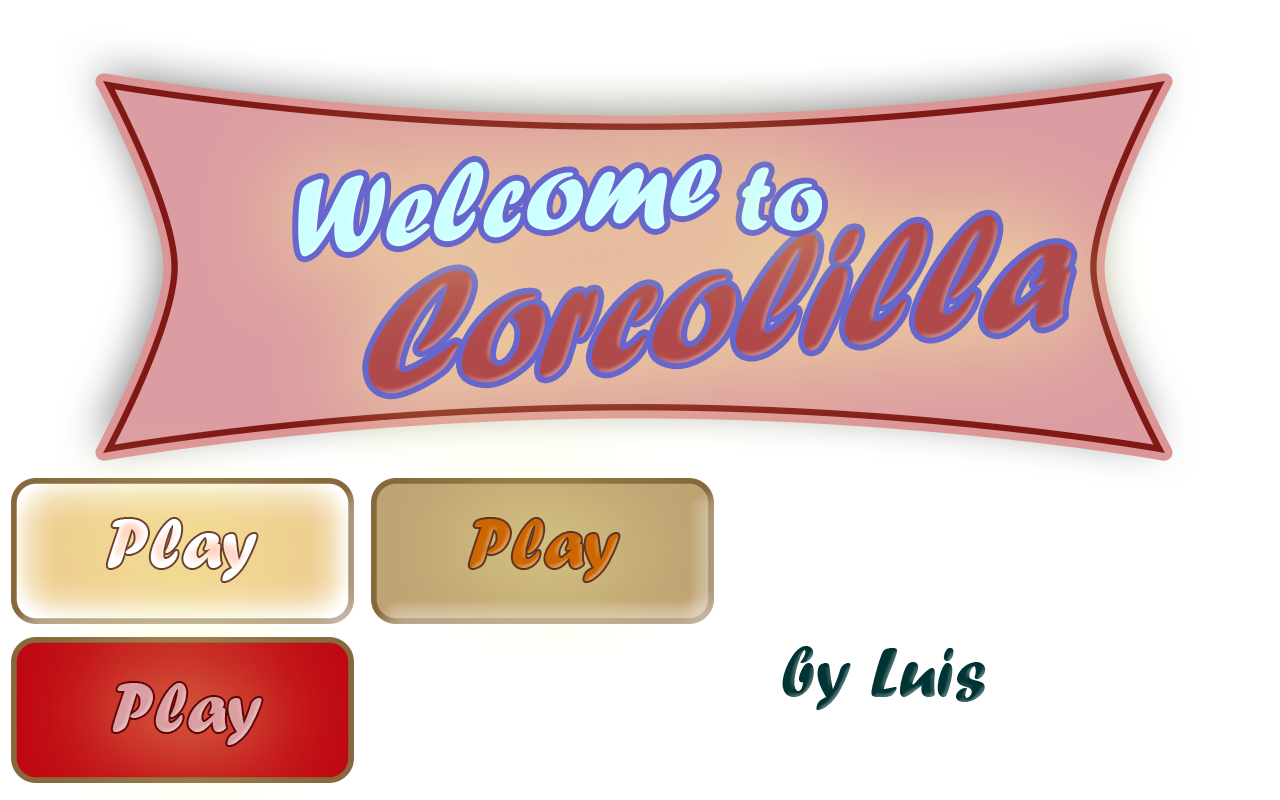
<style>
.page{position:relative;width:1280px;height:800px;background:#ffffff}
.page>*{position:absolute;margin:0}
.t1{font:114.3px "ForteMT";color:#ccffff}
.t2{font:95.8px "ForteMT";color:#ccffff}
.t3{font:180.3px "ForteMT";color:#b04a4a;scale:0.86 1}
.t4{font:72px "ForteMT";color:#fff6f2}
.t5{font:72px "ForteMT";color:#cc6600}
.t6{font:72px "ForteMT";color:#003333}
.t7{font:72px "ForteMT";color:#db9ea1}
</style>
<div class="page">
<p class="t1" style="left:298px;top:159px;width:418px;height:98px;rotate:-6deg">Welcome</p>
<p class="t2" style="left:741px;top:167px;width:81px;height:64px;rotate:-1deg">to</p>
<p class="t3" style="left:368px;top:215px;width:704px;height:179px;rotate:-6deg">Corcolilla</p>
<p class="t4" style="left:107px;top:519px;width:150px;height:62px">Play</p>
<p class="t5" style="left:469px;top:519px;width:150px;height:62px">Play</p>
<p class="t6" style="left:782px;top:646px;width:204px;height:64px">by Luis</p>
<p class="t7" style="left:112px;top:683px;width:150px;height:62px">Play</p>
</div>
